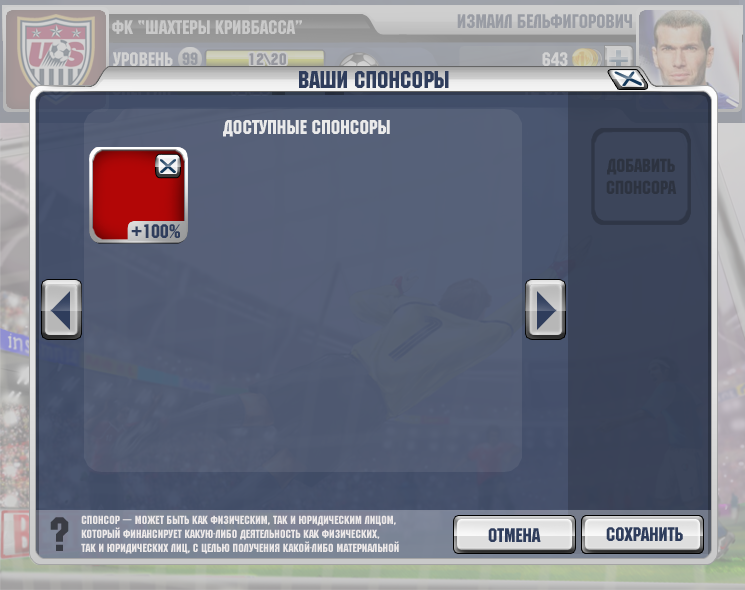
<style>
.page{position:relative;width:745px;height:590px}
.page>*{position:absolute;margin:0}
.t1{font:19.5px "MachineCTT";color:#999ca4}
.t2{font:19.5px "MachineCTT";color:#dcdcdc}
.t3{font:19.5px "MachineCTT";color:#d2d2d2}
.t4{font:17.7px "MachineCTT";color:#989ba3}
.t5{font:16.9px "MachineCTT";letter-spacing:0.04em;color:#97989f}
.t6{font:24.3px "MachineCTT";color:#2f3d5c}
.t7{font:20.1px "MachineCTT";color:#eaeaea}
.t8{font:19.5px "MachineCTT";color:#2f3d5c}
.t9{font:11.8px "MachineCTT";color:#ece8e8}
</style>
<div class="page">
<p class="t1" style="left:457px;top:14px;width:175px;height:14px">Измаил Бельфигорович</p>
<p class="t2" style="left:112px;top:20px;width:190px;height:14px">фк “ШАХТЕРЫ КРИВБАССА”</p>
<p class="t3" style="left:113px;top:52px;width:60px;height:14px">УРОВЕНЬ</p>
<p class="t4" style="left:182px;top:52px;width:16px;height:13px">99</p>
<p class="t5" style="left:249px;top:53px;width:37px;height:12px">12\20</p>
<p class="t3" style="left:542px;top:52px;width:26px;height:14px">643</p>
<p class="t6" style="left:299px;top:71px;width:150px;height:17px">Ваши спонсоры</p>
<p class="t7" style="left:223px;top:120px;width:167px;height:17px">доступные спонсоры</p>
<p class="t8" style="left:131px;top:224px;width:49px;height:14px">+100%</p>
<p class="t9" style="left:81px;top:515px;width:318px;height:39px">Спонсор — может быть как физическим, так и юридическим лицом, <br>который финансирует какую-либо деятельность как физических,<br>так и юридических лиц, c целью получения какой-либо материальной</p>
</div>
